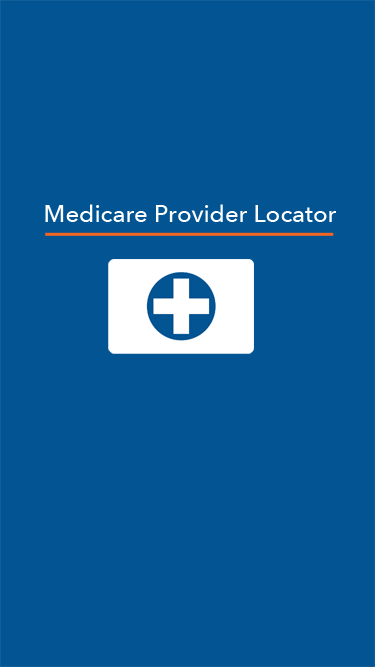
<style>
.page{position:relative;width:375px;height:667px;background:#025493}
.page>*{position:absolute;margin:0}
.t1{font:24px "AvenirNext-Medium";color:#ffffff}
</style>
<div class="page">
<p class="t1" style="left:45px;top:204px;width:291px;height:18px">Medicare Provider Locator</p>
</div>
